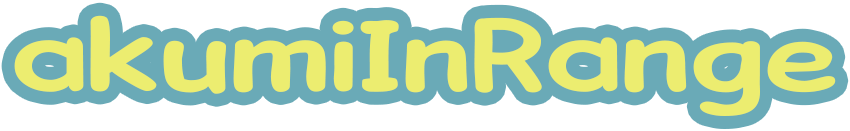
<style>
.page{position:relative;width:850px;height:131px;background:#ffffff}
.page>*{position:absolute;margin:0}
.t1{font:94.5px "Kronika";color:#eced70;scale:1.3 1}
</style>
<div class="page">
<p class="t1" style="left:14px;top:15px;width:822px;height:101px">akumiInRange</p>
</div>
